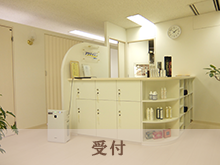
<style>
.page{position:relative;width:220px;height:165px}
.page>*{position:absolute;margin:0}
.t1{font:17px "HGSSoeiPresenceEB";letter-spacing:0.075em;color:#73523f}
</style>
<div class="page">
<p class="t1" style="left:91px;top:140px;width:35px;height:16px">受付</p>
</div>
